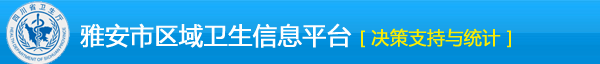
<style>
.page{position:relative;width:600px;height:64px}
.page>*{position:absolute;margin:0}
.t1{font:24px "MicrosoftYaHei";color:#fefefe;font-weight:bold}
.t2{font:18px "MicrosoftYaHei";color:#fbec02;font-weight:bold}
</style>
<div class="page">
<p class="t1" style="left:80px;top:23px;width:431px;height:25px">雅安市区域卫生信息平台 <span class="t2">[ 决策支持与统计 ]</span></p>
</div>
